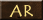
<style>
.page{position:relative;width:43px;height:20px}
.page>*{position:absolute;margin:0}
.t1{font:16px "TempusSansITC";color:#f6dd80;font-weight:bold}
</style>
<div class="page">
<p class="t1" style="left:9px;top:4px;width:24px;height:13px">AR</p>
</div>
